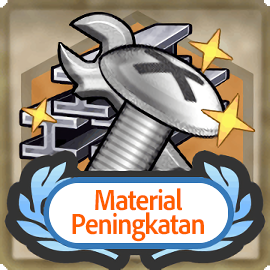
<style>
.page{position:relative;width:270px;height:270px}
.page>*{position:absolute;margin:0}
.t1{font:30px/24px "AdobeClean-Bold";letter-spacing:-0.04em;color:#ff5d00;scale:0.9 1}
</style>
<div class="page">
<p class="t1" style="left:72px;top:188px;width:132px;height:54px;text-align:center">Material<br>Peningkatan</p>
</div>
